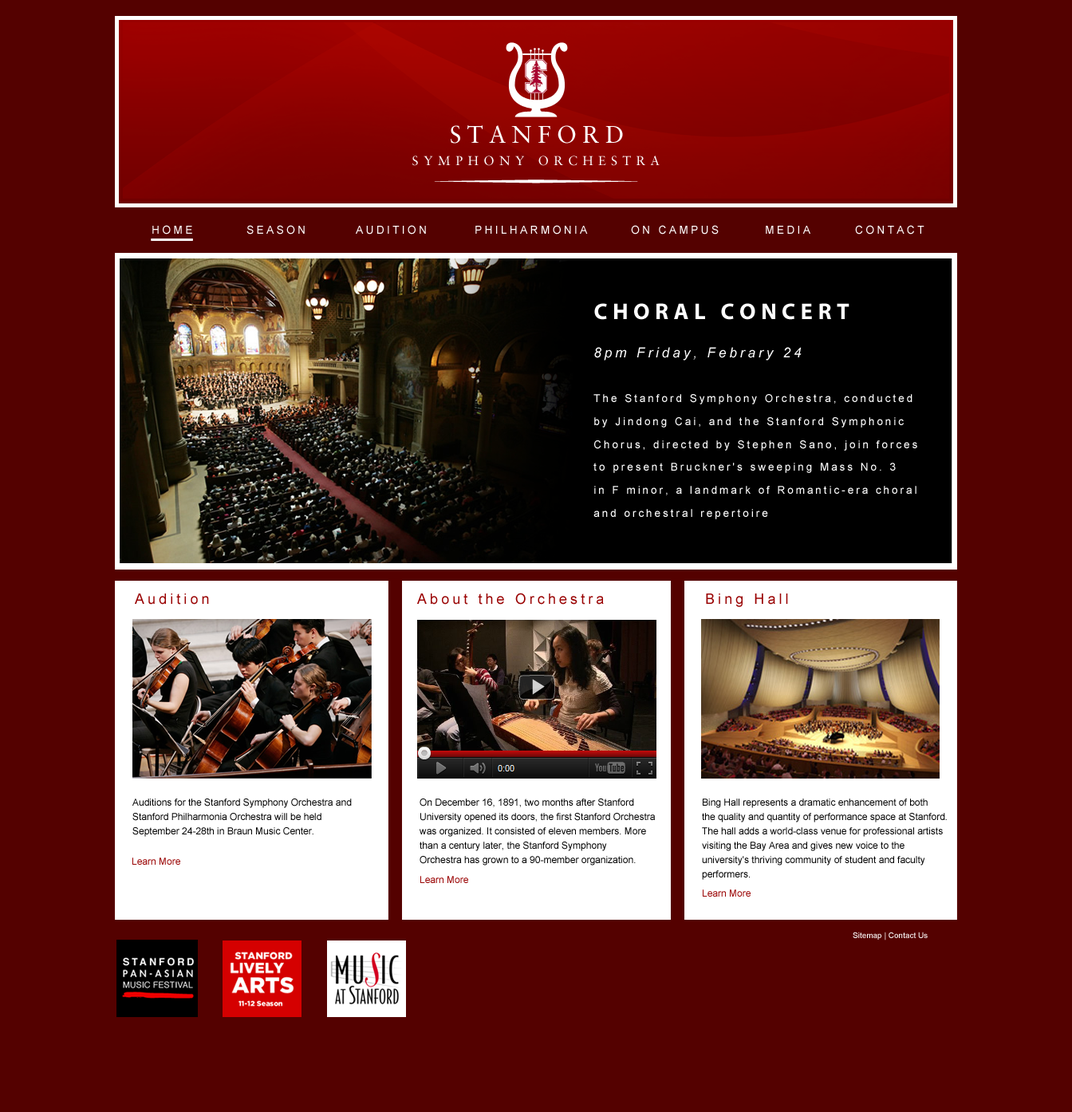
<style>
.page{position:relative;width:1072px;height:1112px;background:#540100}
.page>*{position:absolute;margin:0}
.t1{font:23.9px "SabonLTStd-Roman";letter-spacing:0.24em;color:#ffffff}
.t2{font:12.8px "SabonLTStd-Roman";letter-spacing:0.4em;color:#ffffff}
.t3{font:11.2px "ArialMT";letter-spacing:0.226em;color:#ffffff}
.t4{font:10.7px/22.9px "ArialMT";letter-spacing:0.226em;color:#ffffff}
.t5{font:22.9px "MyriadPro-Bold";letter-spacing:0.226em;color:#ffffff}
.t6{font:13.7px "Arial-ItalicMT";letter-spacing:0.226em;color:#ffffff}
.t7{font:14.4px "ArialMT";letter-spacing:0.226em;color:#990000}
.t8{font:9.6px/14.4px "ArialMT";color:#000000}
.t9{font:9.6px "ArialMT";color:#990000}
.t10{font:8px "ArialMT";color:#ffffff}
</style>
<div class="page">
<p class="t1" style="left:451px;top:125px;width:172px;height:19px">STANFORD</p>
<p class="t2" style="left:412px;top:156px;width:248px;height:10px">SYMPHONY ORCHESTRA</p>
<p class="t3" style="left:152px;top:225px;width:40px;height:10px">HOME</p>
<p class="t3" style="left:247px;top:225px;width:58px;height:10px">SEASON</p>
<p class="t3" style="left:356px;top:225px;width:70px;height:10px">AUDITION</p>
<p class="t3" style="left:475px;top:225px;width:113px;height:10px">PHILHARMONIA</p>
<p class="t3" style="left:631px;top:225px;width:88px;height:10px">ON CAMPUS</p>
<p class="t3" style="left:766px;top:226px;width:45px;height:8px">MEDIA</p>
<p class="t3" style="left:855px;top:225px;width:70px;height:10px">CONTACT</p>
<p class="t4" style="left:594px;top:303px;width:323px;height:216px"><span class="t5">CHORAL CONCERT<br><br></span><span class="t6">8pm Friday, Febrary 24<br><br><br></span>The Stanford Symphony Orchestra, conducted<br>by Jindong Cai, and the Stanford Symphonic<br>Chorus, directed by Stephen Sano, join forces<br>to present Bruckner's sweeping Mass No. 3<br>in F minor, a landmark of Romantic-era choral<br>and orchestral repertoire</p>
<p class="t7" style="left:135px;top:594px;width:74px;height:11px">Audition</p>
<p class="t7" style="left:417px;top:593px;width:187px;height:12px">About the Orchestra</p>
<p class="t7" style="left:706px;top:594px;width:82px;height:13px">Bing Hall</p>
<p class="t8" style="left:132px;top:799px;width:220px;height:38px">Auditions for the Stanford Symphony Orchestra and<br>Stanford Philharmonia Orchestra will be held<br>September 24-28th in Braun Music Center.</p>
<p class="t8" style="left:420px;top:799px;width:235px;height:67px">On December 16, 1891, two months after Stanford<br>University opened its doors, the first Stanford Orchestra<br>was organized. It consisted of eleven members. More<br>than a century later, the Stanford Symphony<br>Orchestra has grown to a 90-member organization.</p>
<p class="t8" style="left:702px;top:799px;width:245px;height:81px">Bing Hall represents a dramatic enhancement of both<br>the quality and quantity of performance space at Stanford.<br>The hall adds a world-class venue for professional artists<br>visiting the Bay Area and gives new voice to the<br>university's thriving community of student and faculty<br>performers.</p>
<p class="t9" style="left:132px;top:858px;width:48px;height:7px">Learn More</p>
<p class="t9" style="left:420px;top:876px;width:48px;height:7px">Learn More</p>
<p class="t9" style="left:703px;top:890px;width:48px;height:7px">Learn More</p>
<p class="t10" style="left:853px;top:932px;width:75px;height:9px">Sitemap | Contact Us</p>
</div>
